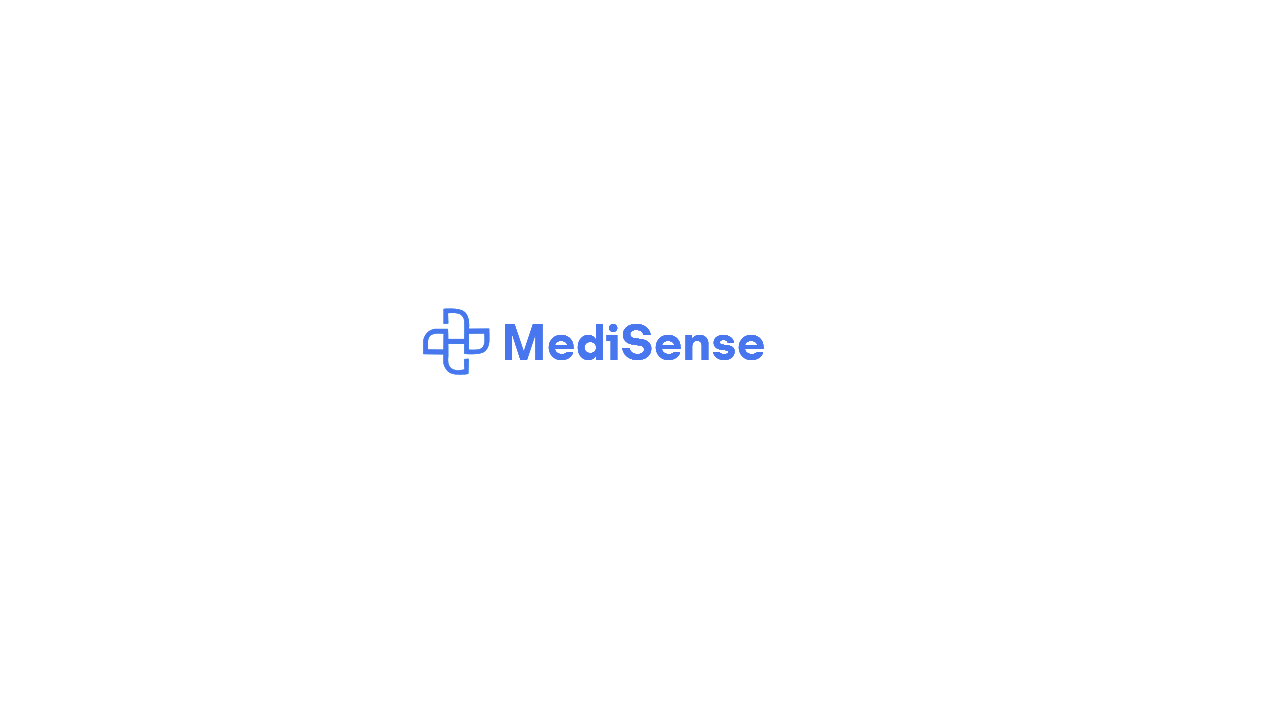
<style>
.page{position:relative;width:1280px;height:720px;background:#ffffff}
.page>*{position:absolute;margin:0}
.t1{font:48px "Friends-UltraBold";letter-spacing:0.02em;color:#4876ee}
</style>
<div class="page">
<p class="t1" style="left:505px;top:324px;width:259px;height:36px">MediSense</p>
</div>
